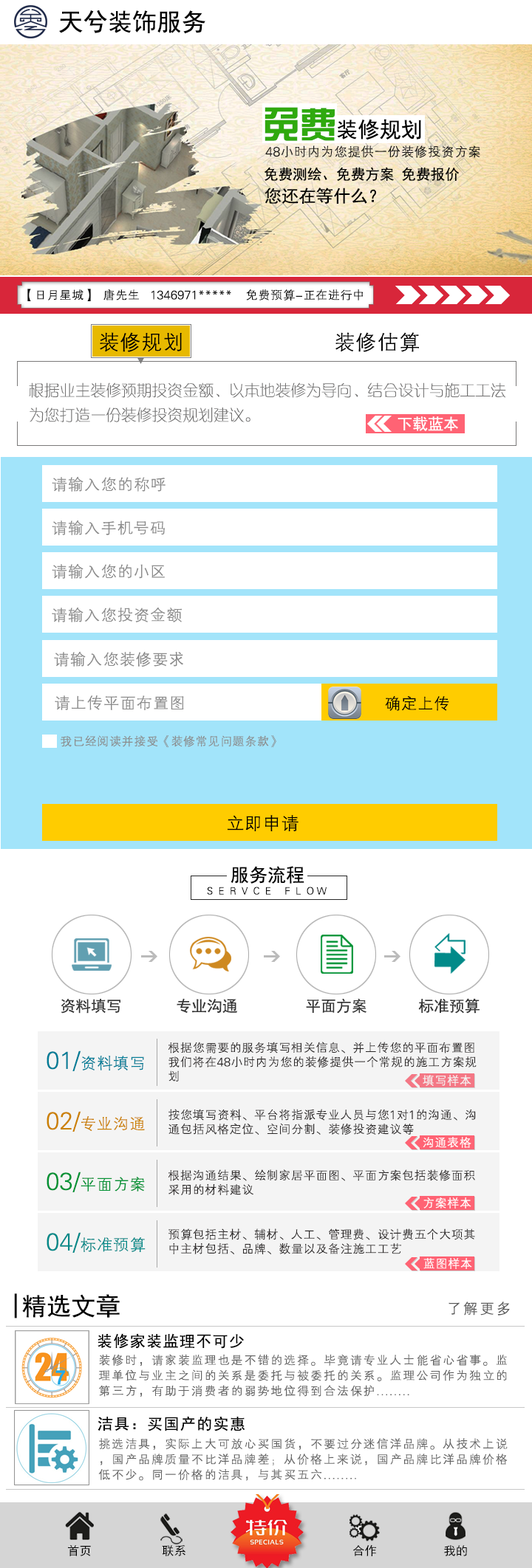
<style>
.page{position:relative;width:532px;height:1568px;background:#ffffff}
.page>*{position:absolute;margin:0}
.t1{font:24.6px "SimHei";color:#000000}
.t2{font:21.7px "SimHei";color:#000000}
.t3{font:36.4px "FZZYJW--GB1-0";color:#2fa90e}
.t4{font:13.3px "FZXH1JW--GB1-0";color:#141414}
.t5{font:14.5px "SimHei";color:#000000}
.t6{font:17.2px "SimHei";color:#000000}
.t7{font:12.3px "FZXH1JW--GB1-0";color:#080808}
.t8{font:21.5px "FZXH1JW--GB1-0";color:#000000}
.t9{font:15.4px/24.6px "FZXQJW--GB1-0";color:#717070}
.t10{font:15.4px "SimHei";color:#ffffff}
.t11{font:16.4px "FZXH1JW--GB1-0";color:#8b8b8b}
.t12{font:16.4px "FZXH1JW--GB1-0";color:#000000}
.t13{font:12.3px "FZXH1JW--GB1-0";color:#8b8b8b}
.t14{font:18.5px "FZXH1JW--GB1-0";color:#000000}
.t15{font:18.5px "SimHei";color:#000000}
.t16{font:10.1px "FZXH1JW--GB1-0";color:#000000}
.t17{font:15.4px "SimHei";color:#353535}
.t18{font:12.3px/14.4px "FZXH1JW--GB1-0";color:#2b2828}
.t19{font:16.4px "FZXH1JW--GB1-0";color:#007d97}
.t20{font:8.9px "FZXH1JW--GB1-0";color:#007d97}
.t21{font:12.3px "FZXH1JW--GB1-0";color:#ffffff}
.t22{font:16.4px "FZXH1JW--GB1-0";color:#cb8100}
.t23{font:8.9px "FZXH1JW--GB1-0";color:#cb8100}
.t24{font:16.4px "FZXH1JW--GB1-0";color:#019234}
.t25{font:8.9px "FZXH1JW--GB1-0";color:#019234}
.t26{font:16.4px "FZXH1JW--GB1-0";color:#028a89}
.t27{font:8.9px "FZXH1JW--GB1-0";color:#028a89}
.t28{font:15.4px "FZXH1JW--GB1-0";letter-spacing:0.075em;color:#5a5a5a}
.t29{font:15.4px "SimHei";letter-spacing:0.075em;color:#000000}
.t30{font:12.3px/15.4px "FZXH1JW--GB1-0";letter-spacing:0.075em;color:#636363}
.t31{font:15.4px/18.5px "SimHei";letter-spacing:0.075em;color:#000000}
.t32{font:12px "SimHei";color:#000000}
</style>
<div class="page">
<p class="t1" style="left:59px;top:10px;width:146px;height:24px">天兮装饰服务</p>
<p class="t2" style="left:264px;top:107px;width:157px;height:34px"><span class="t3">免费</span>装修规划</p>
<p class="t4" style="left:265px;top:145px;width:215px;height:13px">48小时内为您提供一份装修投资方案</p>
<p class="t5" style="left:264px;top:167px;width:195px;height:15px">免费测绘、免费方案 免费报价</p>
<p class="t6" style="left:264px;top:188px;width:112px;height:16px">您还在等什么？</p>
<p class="t7" style="left:27px;top:289px;width:335px;height:12px">【日月星城】  唐先生   1346971*****    免费预算-正在进行中</p>
<p class="t8" style="left:100px;top:332px;width:319px;height:20px">装修规划                         装修估算</p>
<p class="t9" style="left:29px;top:382px;width:477px;height:40px">根据业主装修预期投资金额、以本地装修为导向、结合设计与施工工法<br>为您打造一份装修投资规划建议。</p>
<p class="t10" style="left:397px;top:416px;width:61px;height:15px">下载蓝本</p>
<p class="t11" style="left:52px;top:477px;width:113px;height:15px">请输入您的称呼</p>
<p class="t11" style="left:52px;top:520px;width:113px;height:15px">请输入手机号码</p>
<p class="t11" style="left:52px;top:564px;width:113px;height:15px">请输入您的小区</p>
<p class="t11" style="left:52px;top:608px;width:130px;height:14px">请输入您投资金额</p>
<p class="t11" style="left:54px;top:652px;width:129px;height:15px">请输入您装修要求</p>
<p class="t11" style="left:55px;top:695px;width:129px;height:15px">请上传平面布置图</p>
<p class="t12" style="left:385px;top:696px;width:64px;height:15px">确定上传</p>
<p class="t13" style="left:61px;top:735px;width:215px;height:13px">我已经阅读并接受《装修常见问题条款》</p>
<p class="t14" style="left:227px;top:815px;width:71px;height:16px">立即申请</p>
<p class="t15" style="left:230px;top:866px;width:74px;height:18px">服务流程</p>
<p class="t16" style="left:207px;top:887px;width:119px;height:8px">S  E  R  V  C  E     F  L  O W</p>
<p class="t17" style="left:61px;top:998px;width:59px;height:16px">资料填写</p>
<p class="t17" style="left:176px;top:998px;width:61px;height:16px">专业沟通</p>
<p class="t17" style="left:306px;top:998px;width:60px;height:16px">平面方案</p>
<p class="t17" style="left:418px;top:998px;width:61px;height:16px">标准预算</p>
<p class="t18" style="left:168px;top:1042px;width:308px;height:40px">根据您需要的服务填写相关信息、并上传您的平面布置图<br>我们将在48小时内为您的装修提供一个常规的施工方案规<br>划</p>
<p class="t19" style="left:47px;top:1051px;width:97px;height:20px"><span class="t20">01/</span>资料填写</p>
<p class="t21" style="left:422px;top:1075px;width:49px;height:11px">填写样本</p>
<p class="t18" style="left:168px;top:1109px;width:307px;height:26px">按您填写资料、平台将指派专业人员与您1对1的沟通、沟<br>通包括风格定位、空间分割、装修投资建议等</p>
<p class="t22" style="left:47px;top:1111px;width:98px;height:21px"><span class="t23">02/</span>专业沟通</p>
<p class="t21" style="left:422px;top:1137px;width:49px;height:11px">沟通表格</p>
<p class="t18" style="left:168px;top:1169px;width:307px;height:26px">根据沟通结果、绘制家居平面图、平面方案包括装修面积<br>采用的材料建议</p>
<p class="t24" style="left:47px;top:1172px;width:98px;height:20px"><span class="t25">03/</span>平面方案</p>
<p class="t21" style="left:423px;top:1197px;width:48px;height:11px">方案样本</p>
<p class="t18" style="left:168px;top:1228px;width:307px;height:27px">预算包括主材、辅材、人工、管理费、设计费五个大项其<br>中主材包括、品牌、数量以及备注施工工艺</p>
<p class="t26" style="left:47px;top:1232px;width:98px;height:21px"><span class="t27">04/</span>标准预算</p>
<p class="t21" style="left:423px;top:1258px;width:49px;height:11px">蓝图样本</p>
<p class="t1" style="left:14px;top:1293px;width:106px;height:25px">|精选文章</p>
<p class="t28" style="left:448px;top:1301px;width:61px;height:15px">了解更多</p>
<p class="t29" style="left:97px;top:1333px;width:147px;height:16px">装修家装监理不可少</p>
<p class="t30" style="left:98px;top:1354px;width:408px;height:43px"><span class="t31"><br></span>装修时，请家装监理也是不错的选择。毕竟请专业人士能省心省事。监<br>理单位与业主之间的关系是委托与被委托的关系。监理公司作为独立的<br>第三方，有助于消费者的弱势地位得到合法保护........</p>
<p class="t29" style="left:97px;top:1416px;width:148px;height:15px">洁具：买国产的实惠</p>
<p class="t30" style="left:98px;top:1438px;width:409px;height:43px">挑选洁具，实际上大可放心买国货，不要过分迷信洋品牌。从技术上说<br>，国产品牌质量不比洋品牌差；从价格上来说，国产品牌比洋品牌价格<br>低不少。同一价格的洁具，与其买五六........</p>
<p class="t32" style="left:68px;top:1545px;width:23px;height:11px">首页</p>
<p class="t32" style="left:162px;top:1545px;width:23px;height:11px">联系</p>
<p class="t32" style="left:353px;top:1544px;width:23px;height:12px">合作</p>
<p class="t32" style="left:444px;top:1545px;width:23px;height:11px">我的</p>
</div>
